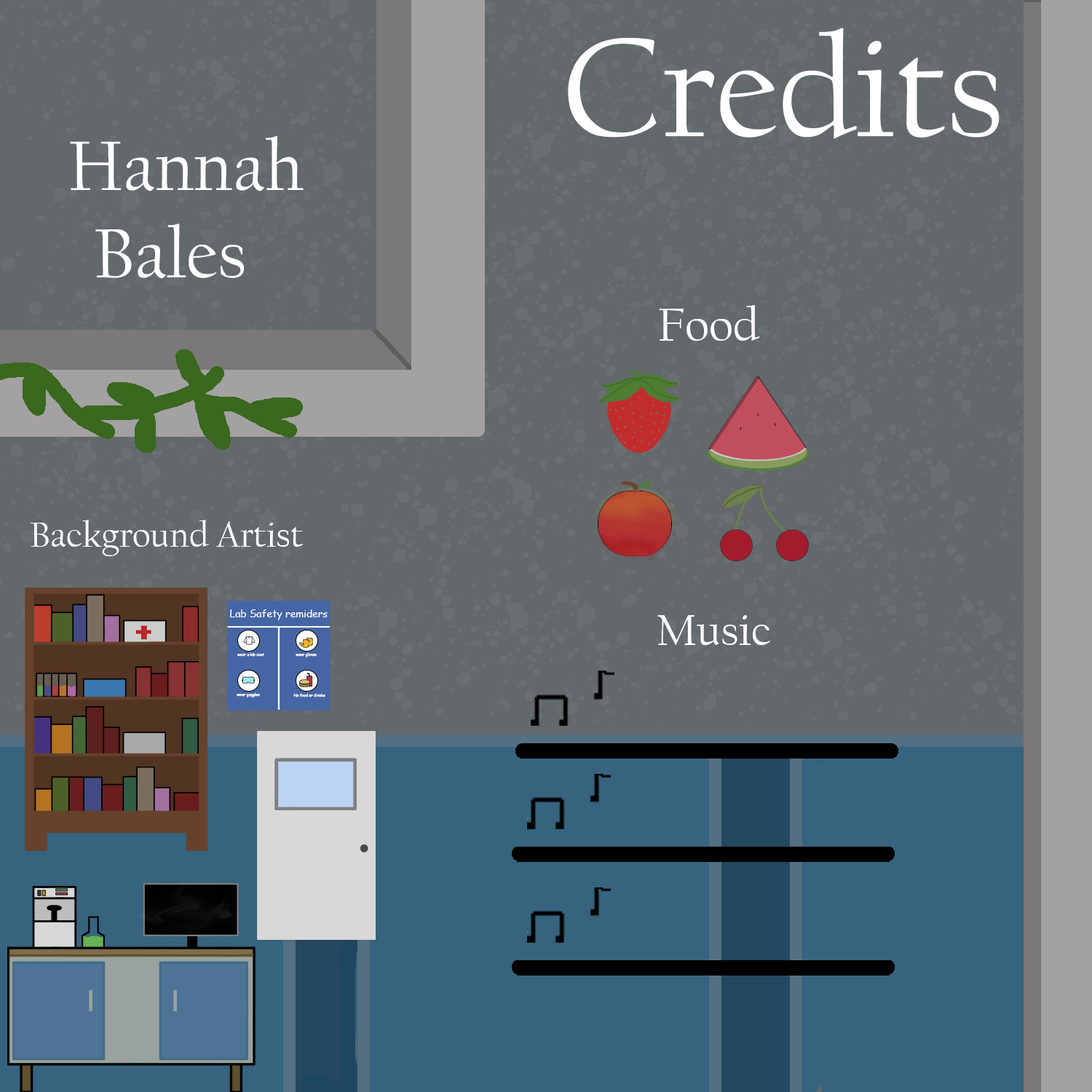
<style>
.page{position:relative;width:1092px;height:1092px;background:#63686b}
.page>*{position:absolute;margin:0}
.t1{font:145.6px "CalifornianFB-Reg";color:#ffffff}
.t2{font:72.8px "CalifornianFB-Reg";color:#ffffff}
.t3{font:49.1px "CalifornianFB-Reg";color:#ffffff}
.t4{font:36.4px "CalifornianFB-Reg";color:#ffffff}
.t5{font:10.1px "ComicSansMS";color:#ffffff}
.t6{font:45.2px "CalifornianFB-Reg";color:#ffffff}
.t7{font:3.8px "ComicSansMS";color:#ffffff}
</style>
<div class="page">
<p class="t1" style="left:568px;top:28px;width:432px;height:111px">Credits</p>
<p class="t2" style="left:70px;top:135px;width:234px;height:144px">Hannah<br> Bales</p>
<p class="t3" style="left:659px;top:305px;width:101px;height:36px">Food</p>
<p class="t4" style="left:31px;top:520px;width:272px;height:36px">Background Artist</p>
<p class="t5" style="left:230px;top:609px;width:98px;height:11px">Lab Safety remiders</p>
<p class="t6" style="left:657px;top:615px;width:113px;height:30px">Music</p>
<p class="t7" style="left:237px;top:652px;width:27px;height:5px">wear a lab coat</p>
<p class="t7" style="left:296px;top:652px;width:21px;height:5px">wear gloves</p>
<p class="t7" style="left:237px;top:692px;width:23px;height:5px">wear goggles</p>
<p class="t7" style="left:293px;top:693px;width:32px;height:4px">No food or drinks</p>
</div>
